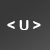
<style>
.page{position:relative;width:50px;height:50px}
.page>*{position:absolute;margin:0}
.t1{font:14px "ArialRoundedMTBold";color:#ffffff}
</style>
<div class="page">
<p class="t1" style="left:7px;top:20px;width:34px;height:10px">&lt; U &gt;</p>
</div>
